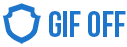
<style>
.page{position:relative;width:127px;height:47px;background:#ffffff}
.page>*{position:absolute;margin:0}
.t1{font:8.7px "BebasNeue";color:#1e76cc}
</style>
<div class="page">
<p class="t1" style="left:49px;top:11px;width:77px;height:26px">GIF OFF</p>
</div>
